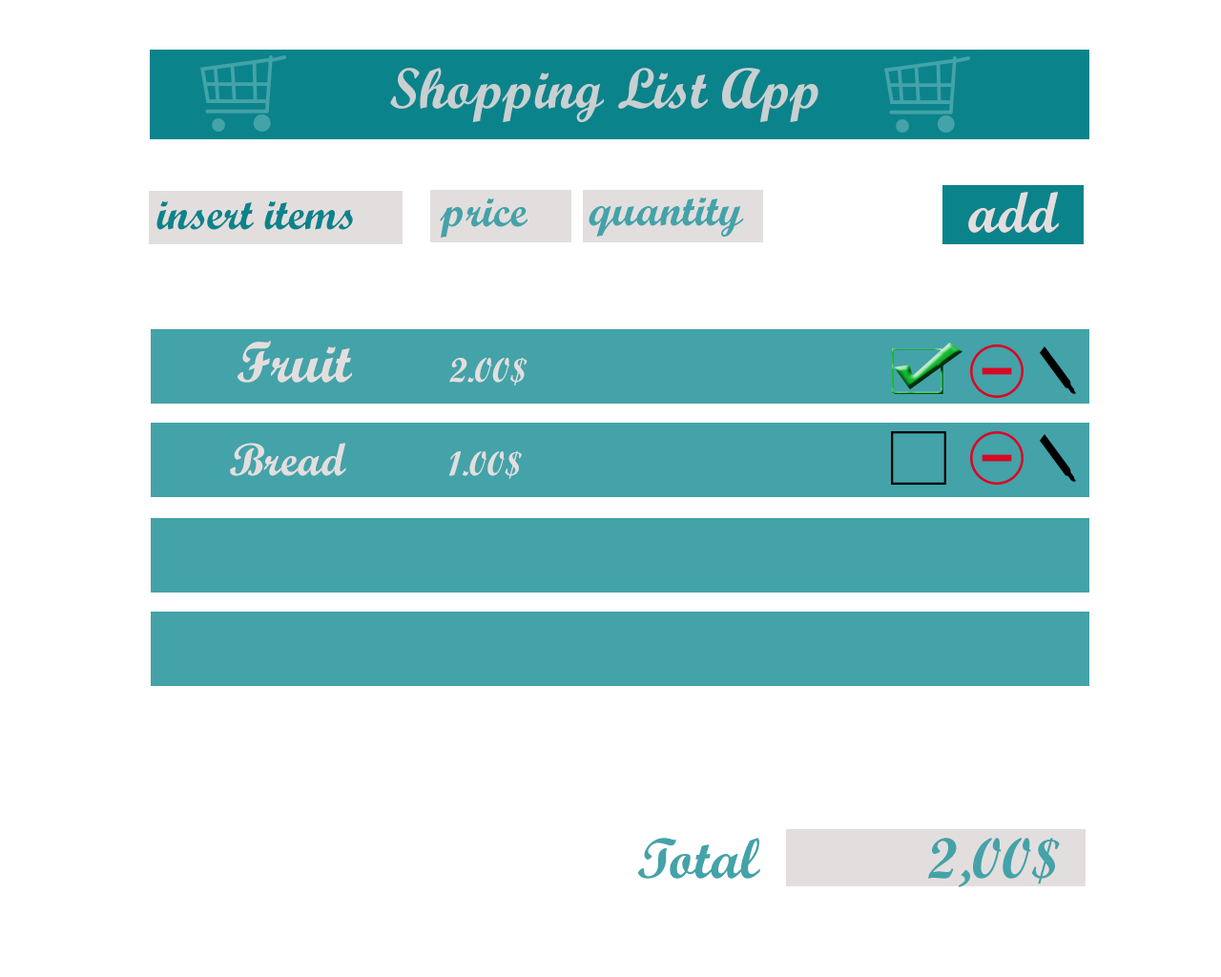
<style>
.page{position:relative;width:1221px;height:977px;background:#ffffff}
.page>*{position:absolute;margin:0}
.t1{font:57.2px "ScriptMTBold";color:#c8d0d1}
.t2{font:45.8px "ScriptMTBold";color:#43a3a9}
.t3{font:57.2px "ScriptMTBold";color:#e3dede}
.t4{font:45.8px "ScriptMTBold";color:#0b838b}
.t5{font:34.3px "ScriptMTBold";color:#e3dede}
.t6{font:45.8px "ScriptMTBold";color:#e3dede}
.t7{font:57.2px "ScriptMTBold";color:#43a3a9}
</style>
<div class="page">
<p class="t1" style="left:390px;top:68px;width:428px;height:54px">Shopping List App</p>
<p class="t2" style="left:440px;top:197px;width:87px;height:40px">price</p>
<p class="t2" style="left:589px;top:196px;width:155px;height:41px">quantity</p>
<p class="t3" style="left:968px;top:192px;width:91px;height:41px">add</p>
<p class="t4" style="left:156px;top:200px;width:197px;height:30px">insert items</p>
<p class="t3" style="left:237px;top:341px;width:115px;height:41px">Fruit</p>
<p class="t5" style="left:449px;top:358px;width:78px;height:27px">2.00$</p>
<p class="t6" style="left:230px;top:443px;width:292px;height:36px">Bread         <span class="t5">1.00$</span></p>
<p class="t7" style="left:638px;top:837px;width:122px;height:41px">Total</p>
<p class="t7" style="left:928px;top:837px;width:132px;height:50px">2,00$</p>
</div>
